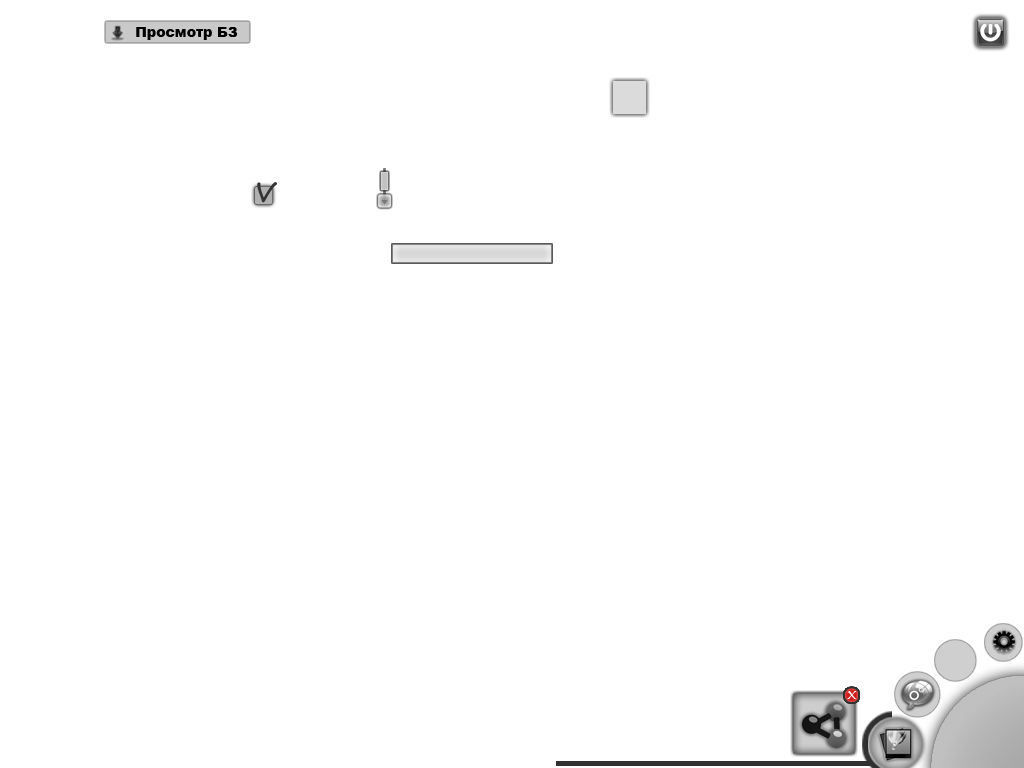
<style>
.page{position:relative;width:1024px;height:768px;background:#ffffff}
.page>*{position:absolute;margin:0}
.t1{font:14px "Arial-Black";color:#000000}
.t2{font:36px "SegoePrint";color:#333333}
.t3{font:18px "BookAntiqua";color:#ffffff}
</style>
<div class="page">
<p class="t1" style="left:136px;top:27px;width:102px;height:13px">Просмотр БЗ</p>
<p class="t2" style="left:257px;top:182px;width:20px;height:21px">v</p>
<p class="t3" style="left:847px;top:691px;width:10px;height:8px">x</p>
<p class="t3" style="left:847px;top:691px;width:10px;height:8px">x</p>
<p class="t3" style="left:847px;top:691px;width:10px;height:8px">x</p>
</div>
